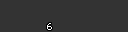
<style>
.page{position:relative;width:128px;height:32px;background:#333333}
.page>*{position:absolute;margin:0}
.t1{font:10px "Terminal";color:#ffffff}
</style>
<div class="page">
<p class="t1" style="left:47px;top:23px;width:5px;height:7px">6</p>
</div>
